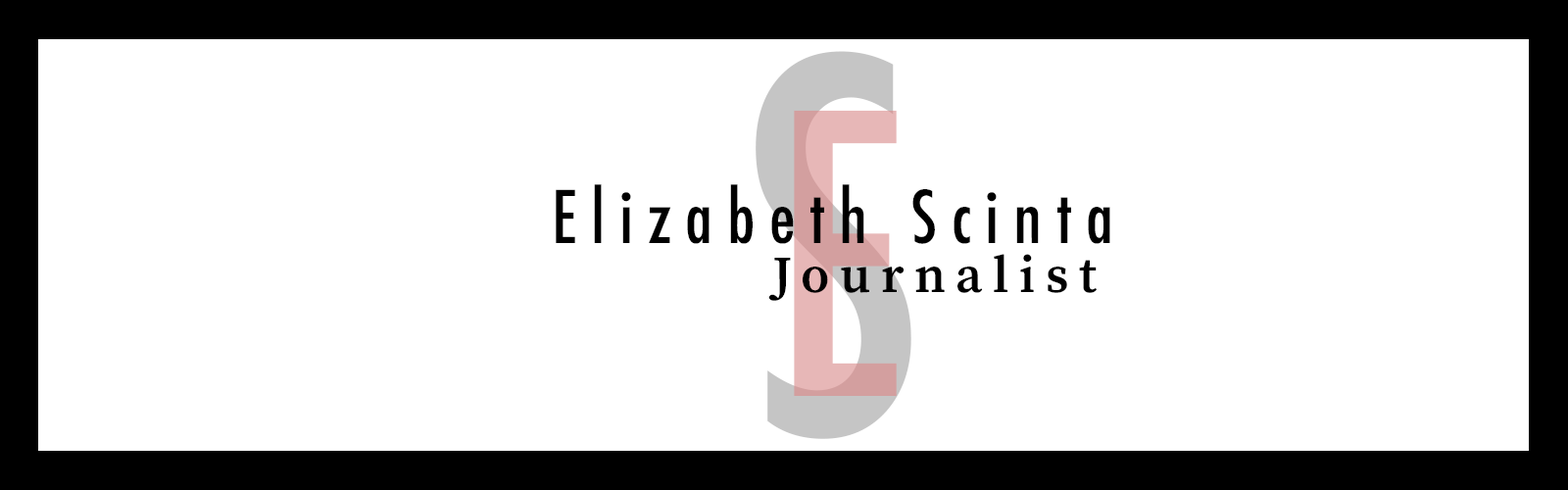
<style>
.page{position:relative;width:1568px;height:490px;background:#ffffff}
.page>*{position:absolute;margin:0}
.t1{font:501.2px "Futura-CondensedMedium";letter-spacing:0.2em;color:#c5c5c5}
.t2{font:378.3px "Futura-CondensedMedium";letter-spacing:0.2em}
.t3{font:70.6px "Futura-CondensedMedium";letter-spacing:0.2em;color:#000000}
.t4{font:51.7px "SourceSerifRoman-Semibold";letter-spacing:0.2em;color:#000000}
</style>
<div class="page">
<p class="t1" style="left:756px;top:51px;width:155px;height:388px">S</p>
<p class="t2" style="left:794px;top:110px;width:103px;height:286px">E</p>
<p class="t3" style="left:556px;top:184px;width:554px;height:60px">Elizabeth Scinta</p>
<p class="t4" style="left:768px;top:254px;width:329px;height:47px">Journalist</p>
</div>
